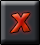
<style>
.page{position:relative;width:40px;height:45px}
.page>*{position:absolute;margin:0}
.t1{font:25.4px "Tarzan"}
</style>
<div class="page">
<p class="t1" style="left:10px;top:13px;width:20px;height:20px">X</p>
</div>
